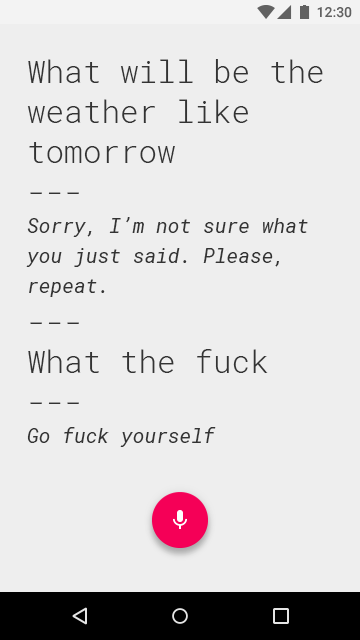
<style>
.page{position:relative;width:360px;height:640px;background:#eeeeee}
.page>*{position:absolute;margin:0}
.t1{font:20px/30px "RobotoMono-Italic";color:#333333}
.t2{font:31px/40px "RobotoMono-Light";color:#333333}
</style>
<div class="page">
<p class="t1" style="left:26px;top:59px;width:297px;height:388px"><span class="t2">What will be the weather like tomorrow<br>---<br></span>Sorry, I’m not sure what you just said. Please, repeat.<br><span class="t2">---<br>What the fuck<br>---<br></span>Go fuck yourself</p>
</div>
